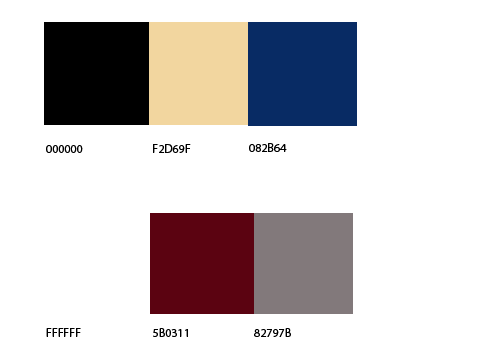
<style>
.page{position:relative;width:504px;height:360px;background:#ffffff}
.page>*{position:absolute;margin:0}
.t1{font:12px "MyriadPro-Regular";color:#000000}
</style>
<div class="page">
<p class="t1" style="left:46px;top:145px;width:37px;height:8px">000000</p>
<p class="t1" style="left:153px;top:144px;width:38px;height:9px">F2D69F</p>
<p class="t1" style="left:249px;top:143px;width:38px;height:9px">082B64</p>
<p class="t1" style="left:46px;top:328px;width:35px;height:9px">FFFFFF</p>
<p class="t1" style="left:153px;top:328px;width:35px;height:9px">5B0311</p>
<p class="t1" style="left:254px;top:328px;width:37px;height:9px">82797B</p>
</div>
